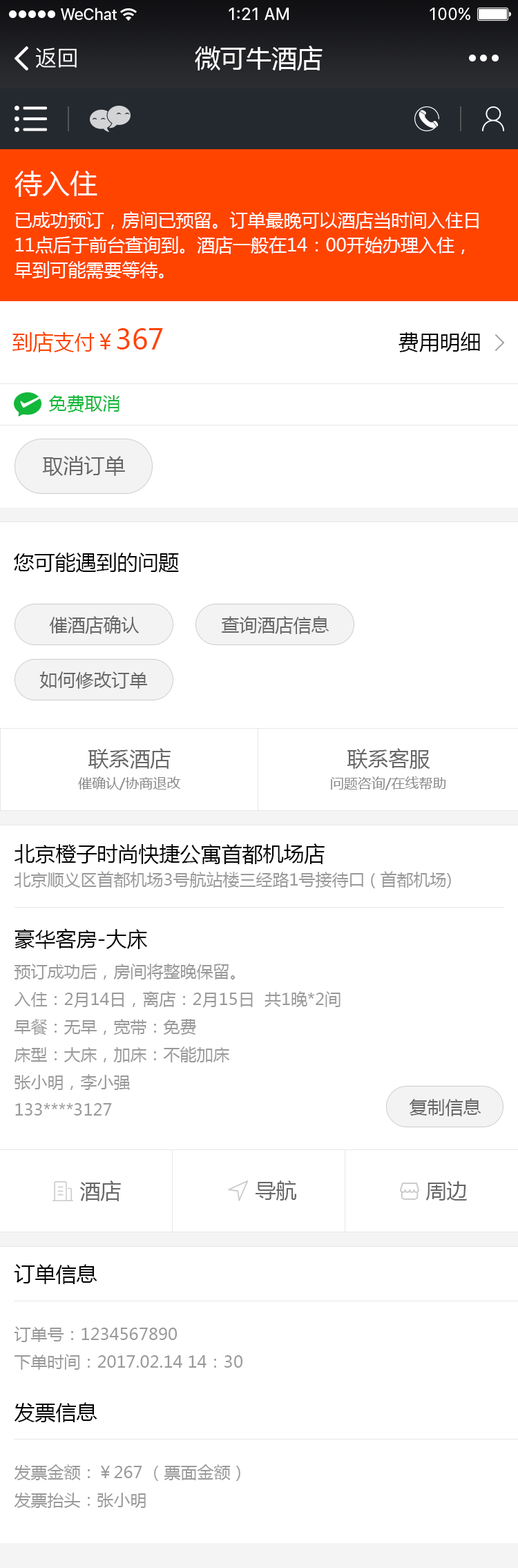
<style>
.page{position:relative;width:518px;height:1568px;background:#ffffff}
.page>*{position:absolute;margin:0}
.t1{font:22.1px "PingFangSC-Regular";color:#ffffff}
.t2{font:25.6px "MicrosoftYaHei";color:#ffffff}
.t3{font:18px/24.9px "MicrosoftYaHei";color:#ffffff}
.t4{font:27.6px/41.4px "MicrosoftYaHei";color:#ffffff}
.t5{font:20.7px "MicrosoftYaHei";color:#ff4400}
.t6{font:27.6px "MicrosoftYaHei";color:#ff4400}
.t7{font:20.7px "MicrosoftYaHei";color:#020202}
.t8{font:18px "MicrosoftYaHei";color:#13b83a}
.t9{font:20.7px "MicrosoftYaHei";color:#666666}
.t10{font:20.7px "MicrosoftYaHei";color:#000000}
.t11{font:18px "MicrosoftYaHei";color:#666666}
.t12{font:13.8px/27.6px "MicrosoftYaHei";color:#888888}
.t13{font:20.7px/27.6px "MicrosoftYaHei";color:#666666}
.t14{font:16.6px/27.6px "MicrosoftYaHei";color:#999999}
.t15{font:20.7px/27.6px "MicrosoftYaHei";color:#000000}
.t16{font:20.7px/34.5px "MicrosoftYaHei";color:#000000}
</style>
<div class="page">
<p class="t1" style="left:36px;top:48px;width:41px;height:20px">返回</p>
<p class="t2" style="left:195px;top:46px;width:128px;height:24px">微可牛酒店</p>
<p class="t3" style="left:15px;top:171px;width:464px;height:108px"><span class="t4">待入住<br></span>已成功预订，房间已预留。订单最晚可以酒店当时间入住日<br>11点后于前台查询到。酒店一般在14：00开始办理入住，<br>早到可能需要等待。</p>
<p class="t5" style="left:12px;top:328px;width:151px;height:24px">到店支付￥<span class="t6">367</span></p>
<p class="t7" style="left:399px;top:332px;width:81px;height:20px">费用明细</p>
<p class="t8" style="left:48px;top:395px;width:71px;height:17px">免费取消</p>
<p class="t9" style="left:42px;top:456px;width:83px;height:20px">取消订单</p>
<p class="t10" style="left:13px;top:553px;width:166px;height:20px">您可能遇到的问题</p>
<p class="t11" style="left:49px;top:615px;width:91px;height:19px">催酒店确认</p>
<p class="t11" style="left:221px;top:616px;width:108px;height:18px">查询酒店信息</p>
<p class="t11" style="left:39px;top:671px;width:108px;height:18px">如何修改订单</p>
<p class="t12" style="left:78px;top:748px;width:103px;height:42px;text-align:center"><span class="t13">联系酒店<br></span>催确认/协商退改</p>
<p class="t12" style="left:331px;top:748px;width:115px;height:42px;text-align:center"><span class="t13">联系客服<br></span>问题咨询/在线帮助</p>
<p class="t14" style="left:14px;top:843px;width:437px;height:45px"><span class="t15">北京橙子时尚快捷公寓首都机场店<br></span>北京顺义区首都机场3号航站楼三经路1号接待口 ( 首都机场)</p>
<p class="t14" style="left:14px;top:928px;width:327px;height:188px"><span class="t16">豪华客房-大床<br></span>预订成功后，房间将整晚保留。<br>入住：2月14日，离店：2月15日  共1晚*2间<br>早餐：无早，宽带：免费<br>床型：大床，加床：不能加床<br>张小明，李小强<br>133****3127</p>
<p class="t11" style="left:409px;top:1098px;width:72px;height:18px">复制信息</p>
<p class="t9" style="left:79px;top:1180px;width:42px;height:21px">酒店</p>
<p class="t9" style="left:256px;top:1180px;width:41px;height:21px">导航</p>
<p class="t9" style="left:426px;top:1181px;width:41px;height:20px">周边</p>
<p class="t10" style="left:15px;top:1264px;width:82px;height:20px">订单信息</p>
<p class="t14" style="left:14px;top:1326px;width:228px;height:44px">订单号：1234567890<br>下单时间：2017.02.14 14：30</p>
<p class="t10" style="left:14px;top:1402px;width:83px;height:20px">发票信息</p>
<p class="t14" style="left:14px;top:1464px;width:226px;height:44px">发票金额：￥267 （票面金额）<br>发票抬头：张小明</p>
</div>
